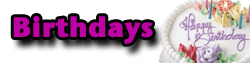
<style>
.page{position:relative;width:250px;height:63px;background:#ffffff}
.page>*{position:absolute;margin:0}
.t1{font:26.8px "StoneSansITCTTBold";letter-spacing:0.01em;color:#bd03a1;font-weight:bold}
</style>
<div class="page">
<p class="t1" style="left:13px;top:15px;width:140px;height:29px">Birthdays</p>
</div>
